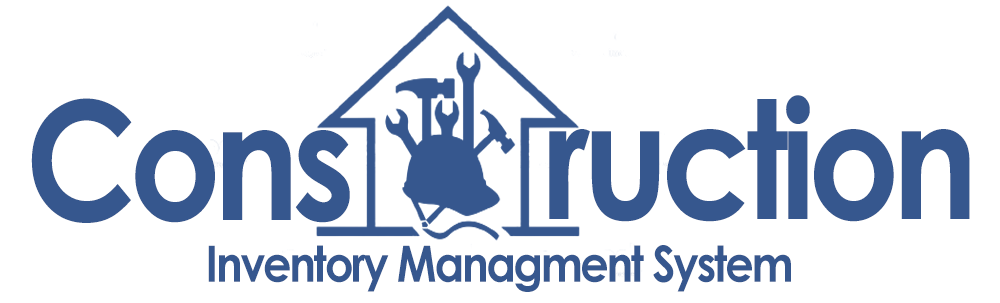
<style>
.page{position:relative;width:1000px;height:303px;background:#ffffff}
.page>*{position:absolute;margin:0}
.t1{font:164.7px "CenturyGothic-Bold";letter-spacing:-0.05em;color:#36578e;scale:0.87 1}
.t2{font:50px "CenturyGothic-Bold";letter-spacing:-0.05em;color:#36578e;scale:0.89 1}
</style>
<div class="page">
<p class="t1" style="left:31px;top:98px;width:319px;height:125px">Cons</p>
<p class="t1" style="left:549px;top:95px;width:421px;height:127px">ruction</p>
<p class="t2" style="left:208px;top:245px;width:583px;height:47px">Inventory Managment System</p>
</div>
